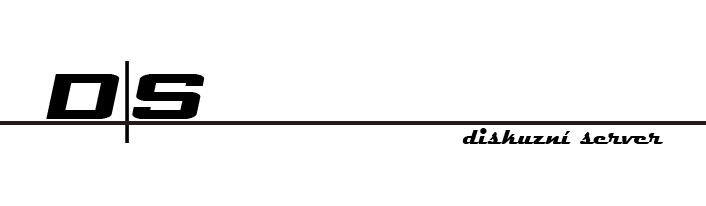
<style>
.page{position:relative;width:706px;height:206px;background:#ffffff}
.page>*{position:absolute;margin:0}
.t1{font:90px "NeverSayDie";color:#000000}
.t2{font:90px "SymbolMT";color:#000000}
.t3{font:24px "Magneto-Bold";color:#000000}
</style>
<div class="page">
<p class="t1" style="left:46px;top:61px;width:159px;height:82px">d<span class="t2">|</span>s</p>
<p class="t3" style="left:462px;top:128px;width:201px;height:16px">diskuzní server</p>
</div>
